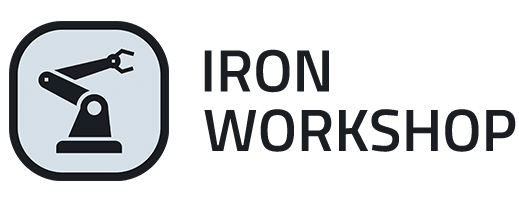
<style>
.page{position:relative;width:519px;height:200px;background:#ffffff}
.page>*{position:absolute;margin:0}
.t1{font:60px "TitilliumWeb-SemiBold";color:#1a1d21}
</style>
<div class="page">
<p class="t1" style="left:204px;top:49px;width:125px;height:44px">IRON</p>
<p class="t1" style="left:204px;top:109px;width:312px;height:43px">WORKSHOP</p>
</div>
